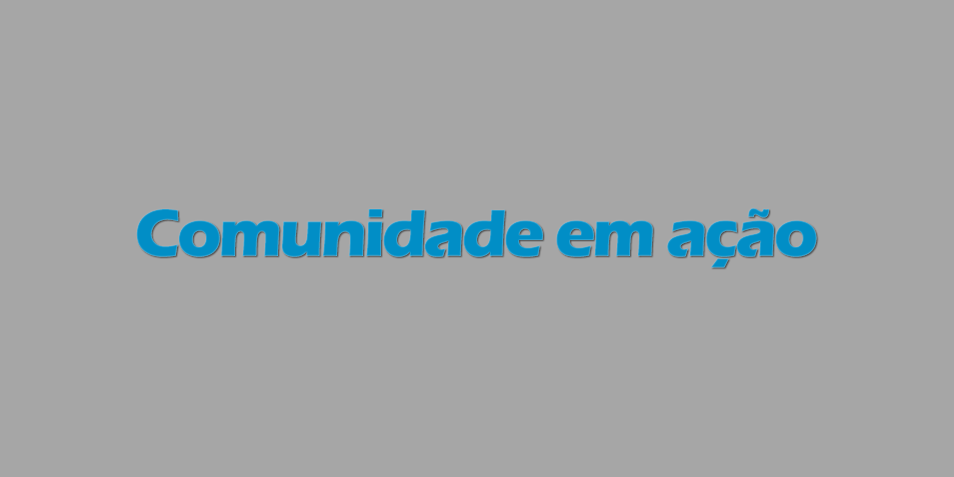
<style>
.page{position:relative;width:954px;height:477px;background:#a6a6a6}
.page>*{position:absolute;margin:0}
.t1{font:68.7px "ErasITC-Bold";letter-spacing:-0.05em;color:#018ec6}
</style>
<div class="page">
<p class="t1" style="left:136px;top:208px;width:681px;height:60px">Comunidade em ação</p>
</div>
